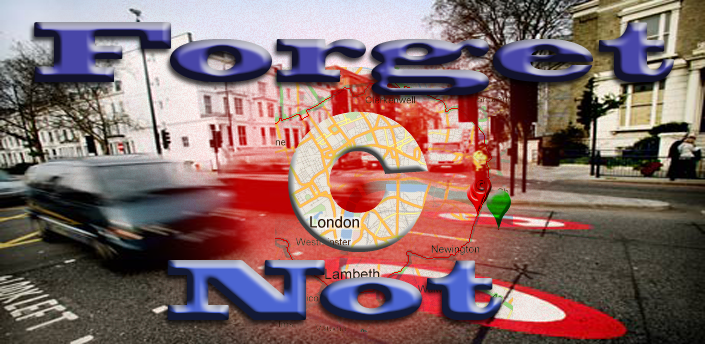
<style>
.page{position:relative;width:705px;height:344px}
.page>*{position:absolute;margin:0}
.t1{font:80px "BlackoakStd"}
.t2{font:200px "Bauhaus93"}
</style>
<div class="page">
<p class="t1" style="left:34px;top:22px;width:640px;height:73px">Forget</p>
<p class="t2" style="left:288px;top:111px;width:140px;height:141px">C</p>
<p class="t1" style="left:167px;top:260px;width:335px;height:60px">Not</p>
</div>
